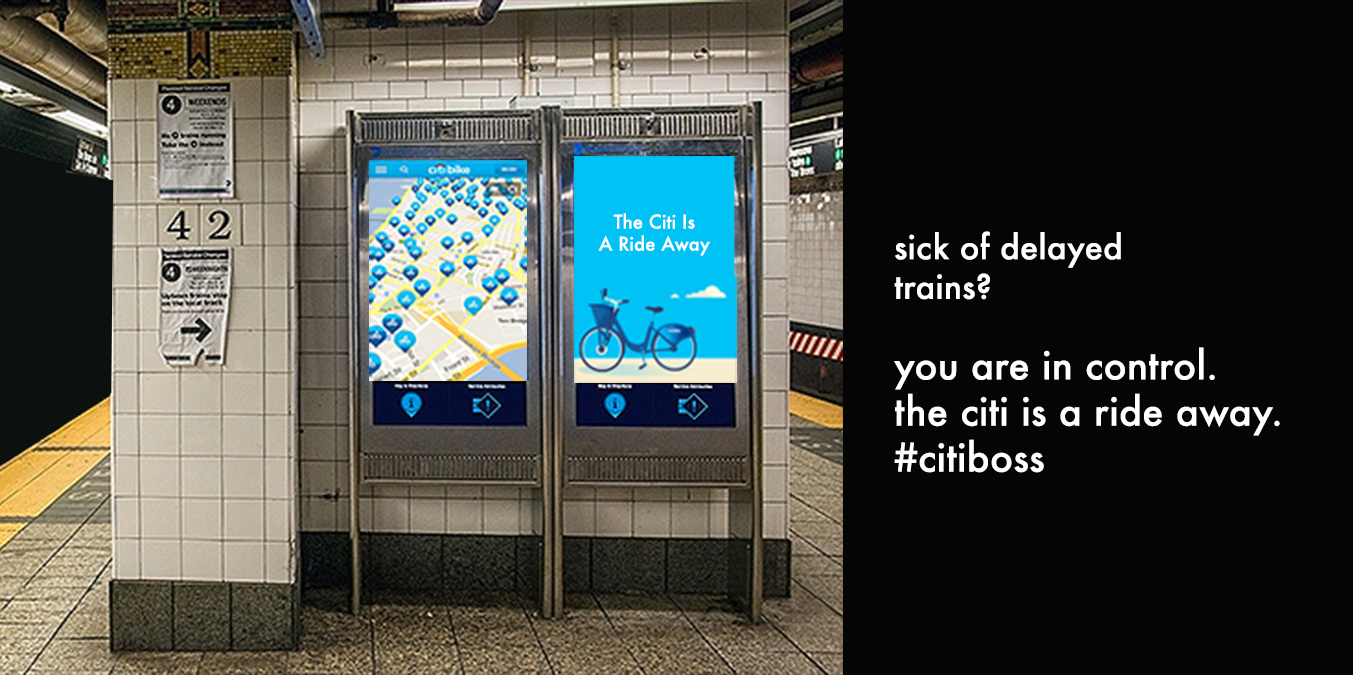
<style>
.page{position:relative;width:1353px;height:675px;background:#060505}
.page>*{position:absolute;margin:0}
.t1{font:18.4px "Futura-Medium";letter-spacing:0.005em;color:#ffffff}
.t2{font:33px "Futura-Medium";letter-spacing:0.005em;color:#ffffff}
.t3{font:38.4px "Futura-Medium";letter-spacing:0.005em;color:#ffffff}
</style>
<div class="page">
<p class="t1" style="left:598px;top:213px;width:112px;height:43px;text-align:center">The Citi Is <br>A Ride Away</p>
<p class="t2" style="left:894px;top:231px;width:227px;height:69px">sick of delayed trains?</p>
<p class="t3" style="left:894px;top:347px;width:386px;height:126px">you are in control.<br>the citi is a ride away.<br>#citiboss</p>
</div>
